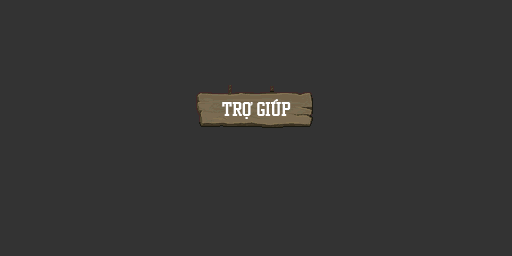
<style>
.page{position:relative;width:512px;height:256px;background:#333333}
.page>*{position:absolute;margin:0}
.t1{font:16px "SVN-Zero";color:#ffffff}
</style>
<div class="page">
<p class="t1" style="left:222px;top:99px;width:69px;height:20px">Trợ Giúp</p>
<p class="t1" style="left:222px;top:99px;width:69px;height:20px">Trợ Giúp</p>
</div>
